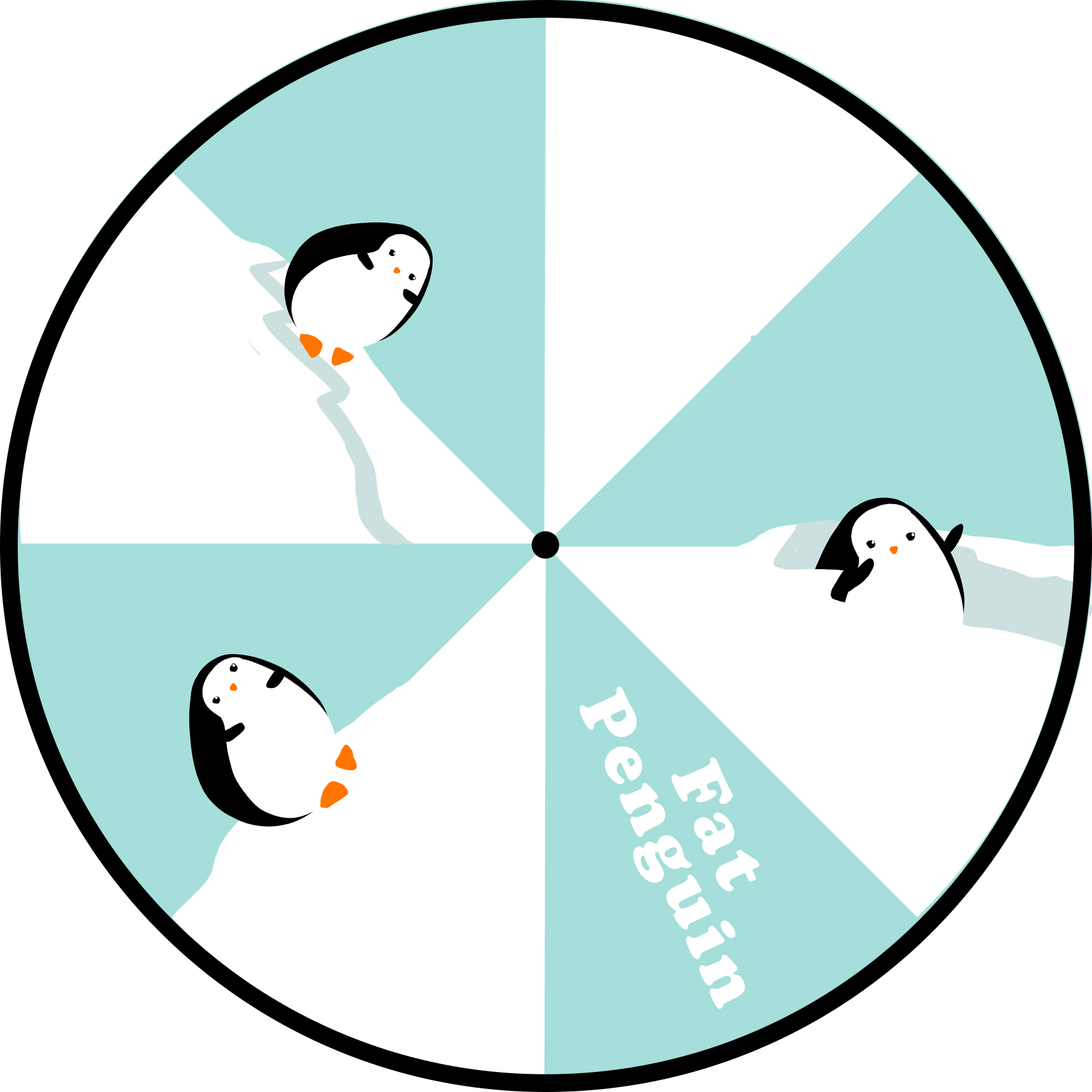
<style>
.page{position:relative;width:1092px;height:1092px;background:#ffffff}
.page>*{position:absolute;margin:0}
.t1{font:72.8px "CooperBlack";letter-spacing:0.075em;color:#ffffff}
</style>
<div class="page">
<p class="t1" style="left:579px;top:686px;width:181px;height:323px;rotate:65deg">Fat Penguin</p>
</div>
